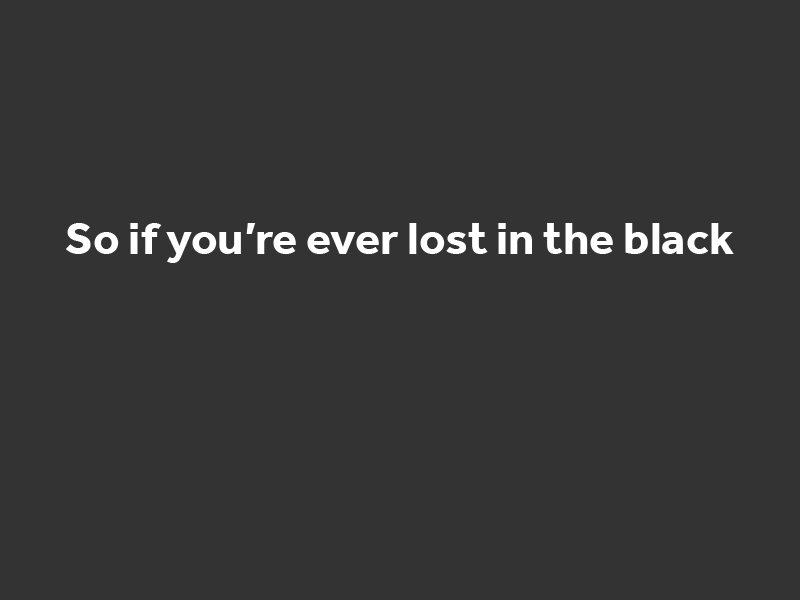
<style>
.page{position:relative;width:800px;height:600px;background:#333333}
.page>*{position:absolute;margin:0}
.t1{font:47.1px "Effra-Bold";color:#ffffff}
</style>
<div class="page">
<p class="t1" style="left:66px;top:223px;width:668px;height:40px">So if you’re ever lost in the black</p>
</div>
